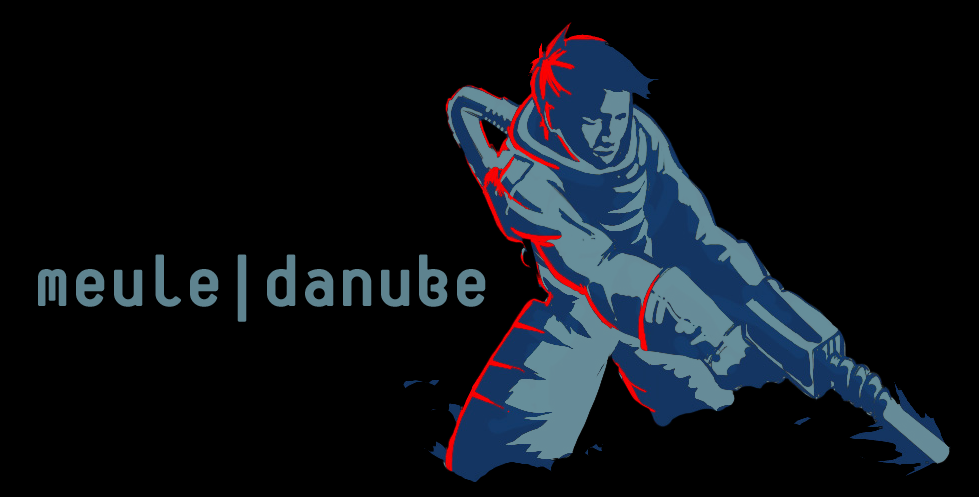
<style>
.page{position:relative;width:979px;height:497px;background:#000000}
.page>*{position:absolute;margin:0}
.t1{font:78.3px "PlateletHeavy";letter-spacing:0.025em;color:#5e838f}
</style>
<div class="page">
<p class="t1" style="left:38px;top:254px;width:448px;height:68px">meule|danube</p>
</div>
